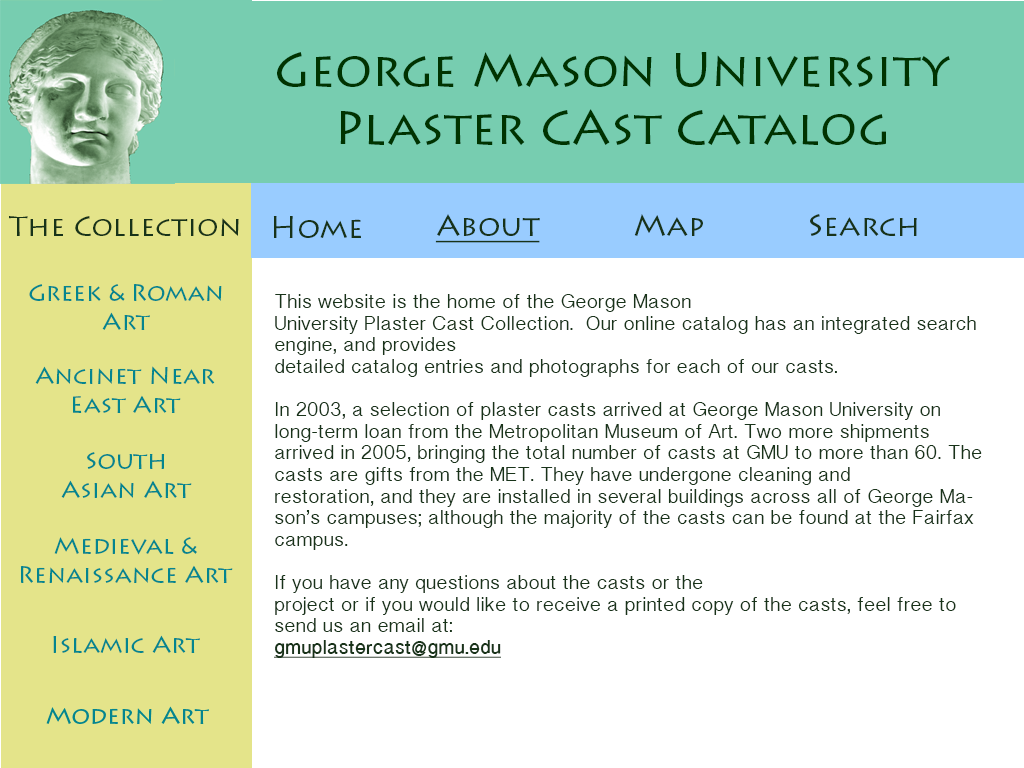
<style>
.page{position:relative;width:1024px;height:768px;background:#ffffff}
.page>*{position:absolute;margin:0}
.t1{font:48px "LithosPro-Regular";color:#003300}
.t2{font:28px "LithosPro-Regular";color:#183319}
.t3{font:30px "LithosPro-Regular";color:#183319}
.t4{font:24px "LithosPro-Regular";color:#183319}
.t5{font:30px "LithosPro-Regular";color:#183319;text-decoration:underline}
.t6{font:24px "LithosPro-Regular";color:#04858f}
.t7{font:18px "BanglaSangamMN";color:#183319}
.t8{font:18px "BanglaSangamMN-Bold";color:#183319;text-decoration:underline}
</style>
<div class="page">
<p class="t1" style="left:277px;top:52px;width:673px;height:93px;text-align:center">George Mason University<br>Plaster CAst Catalog</p>
<p class="t2" style="left:9px;top:216px;width:230px;height:20px">The Collection</p>
<p class="t3" style="left:273px;top:216px;width:88px;height:22px"><span class="t4"><br></span>Home</p>
<p class="t5" style="left:435px;top:214px;width:105px;height:29px"><span class="t4"><br></span>About</p>
<p class="t3" style="left:634px;top:214px;width:69px;height:22px"><span class="t4"><br></span>Map</p>
<p class="t3" style="left:810px;top:214px;width:107px;height:22px"><span class="t4"><br></span>Search</p>
<p class="t6" style="left:29px;top:284px;width:193px;height:46px;text-align:center"><span class="t4"><br></span>Greek &amp; Roman<br>Art</p>
<p class="t7" style="left:274px;top:294px;width:708px;height:364px">This website is the home of the George Mason <br>University Plaster Cast Collection.  Our online catalog has an integrated search engine, and provides <br>detailed catalog entries and photographs for each of our casts. <br><br>In 2003, a selection of plaster casts arrived at George Mason University on long-term loan from the Metropolitan Museum of Art. Two more shipments<br>arrived in 2005, bringing the total number of casts at GMU to more than 60. The casts are gifts from the MET. They have undergone cleaning and<br>restoration, and they are installed in several buildings across all of George Mason’s campuses; although the majority of the casts can be found at the Fairfax campus.<br><br>If you have any questions about the casts or the<br>project or if you would like to receive a printed copy of the casts, feel free to send us an email at:<br><span class="t8">gmuplastercast@gmu.edu</span></p>
<p class="t6" style="left:35px;top:366px;width:180px;height:47px;text-align:center">Ancinet Near <br>East Art</p>
<p class="t6" style="left:61px;top:452px;width:131px;height:46px;text-align:center"><span class="t4"><br></span>South<br>Asian Art</p>
<p class="t6" style="left:20px;top:537px;width:213px;height:46px;text-align:center"><span class="t4"><br></span>Medieval &amp; <br>Renaissance Art</p>
<p class="t6" style="left:53px;top:635px;width:147px;height:18px"><span class="t4"><br></span>Islamic Art</p>
</div>
